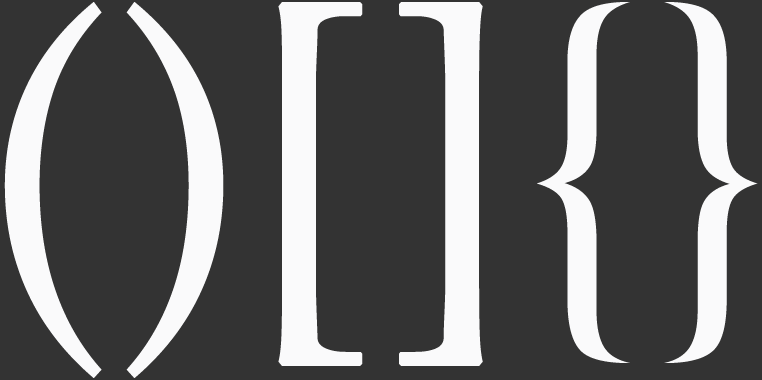
<style>
.page{position:relative;width:762px;height:380px;background:#333333}
.page>*{position:absolute;margin:0}
.t1{font:400px "Palatino-Roman";color:#fafafb}
</style>
<div class="page">
<p class="t1" style="left:4px;top:2px;width:754px;height:376px">()[]{}</p>
</div>
